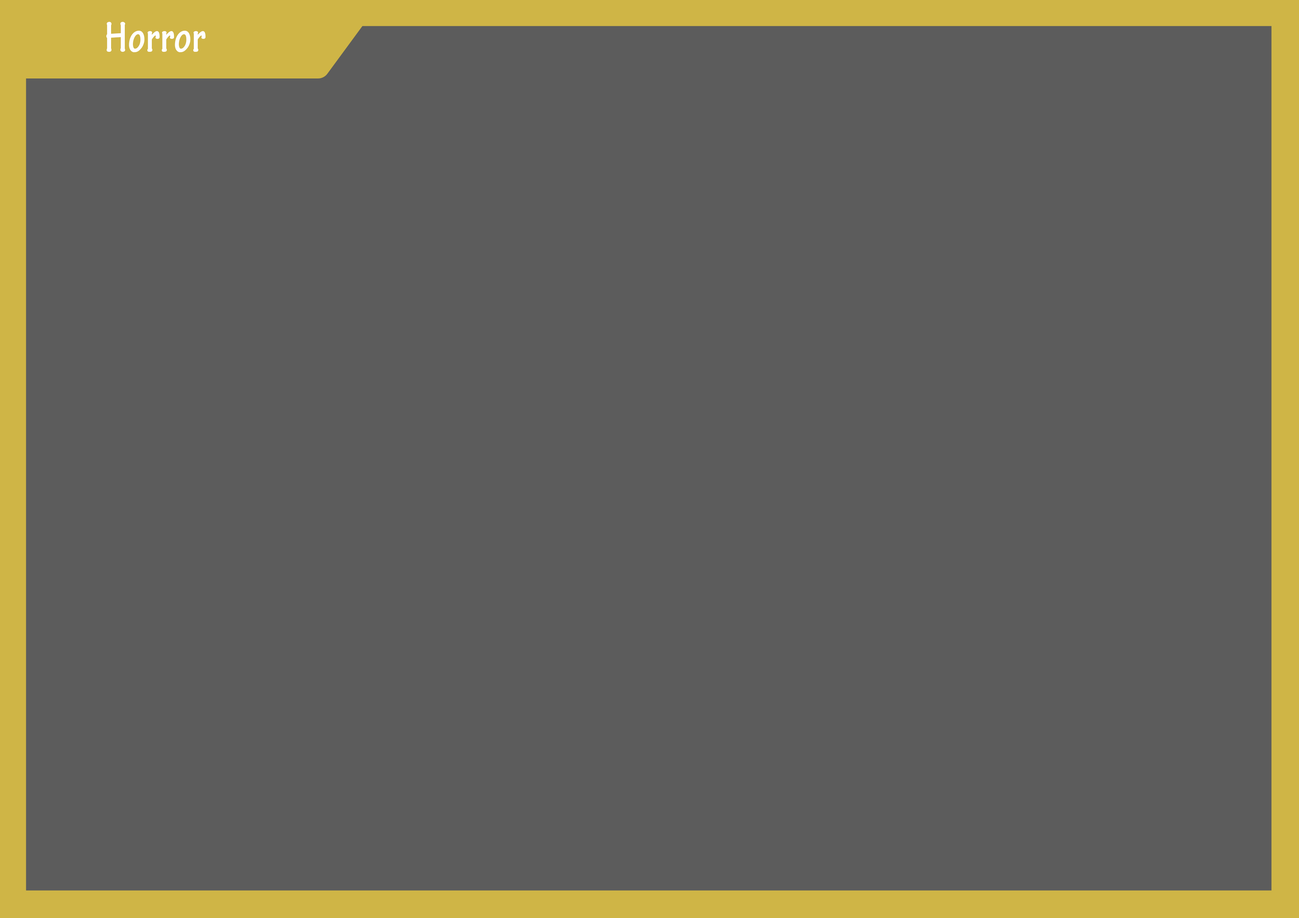
<style>
.page{position:relative;width:1299px;height:918px;background:#5c5c5c}
.page>*{position:absolute;margin:0}
.t1{font:46.3px "TektonPro-BoldCond";color:#ffffff}
</style>
<div class="page">
<p class="t1" style="left:106px;top:22px;width:99px;height:31px">Horror</p>
</div>
